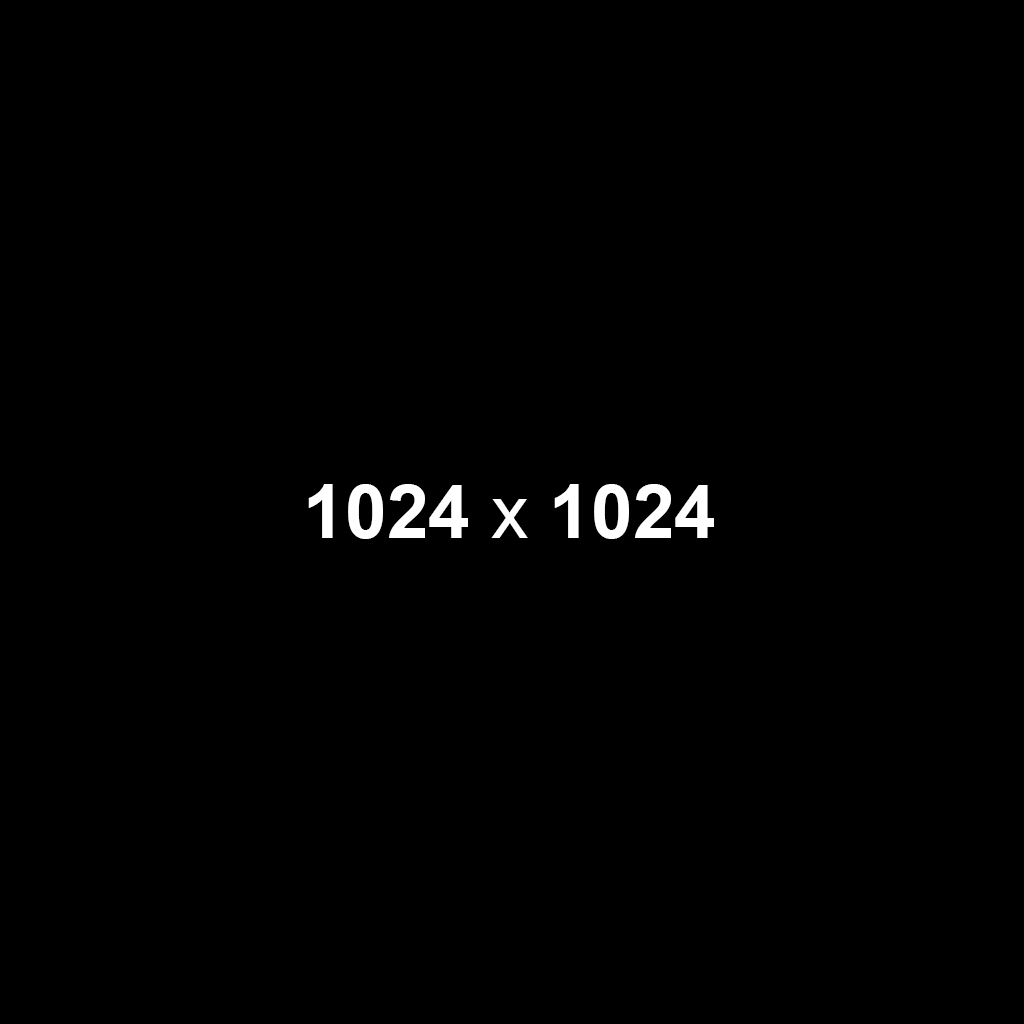
<style>
.page{position:relative;width:1024px;height:1024px;background:#000000}
.page>*{position:absolute;margin:0}
.t1{font:75px "Arial-BoldMT";color:#ffffff}
.t2{font:75px "ArialMT";color:#ffffff}
</style>
<div class="page">
<p class="t1" style="left:308px;top:484px;width:406px;height:55px">1024 <span class="t2">x </span>1024</p>
</div>
